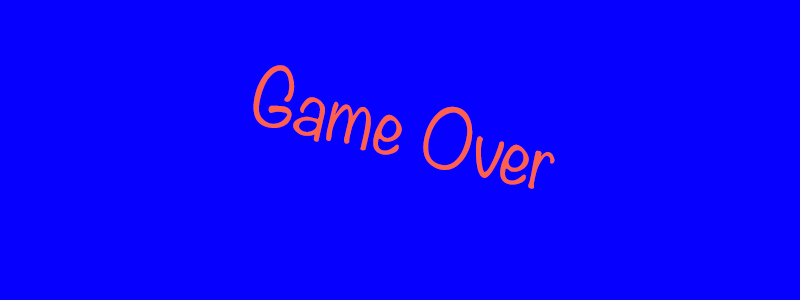
<style>
.page{position:relative;width:800px;height:300px;background:#0600ff}
.page>*{position:absolute;margin:0}
.t1{font:72px "Noteworthy-Light";color:#ff604a}
</style>
<div class="page">
<p class="t1" style="left:253px;top:65px;width:302px;height:124px;rotate:13deg">Game Over</p>
</div>
